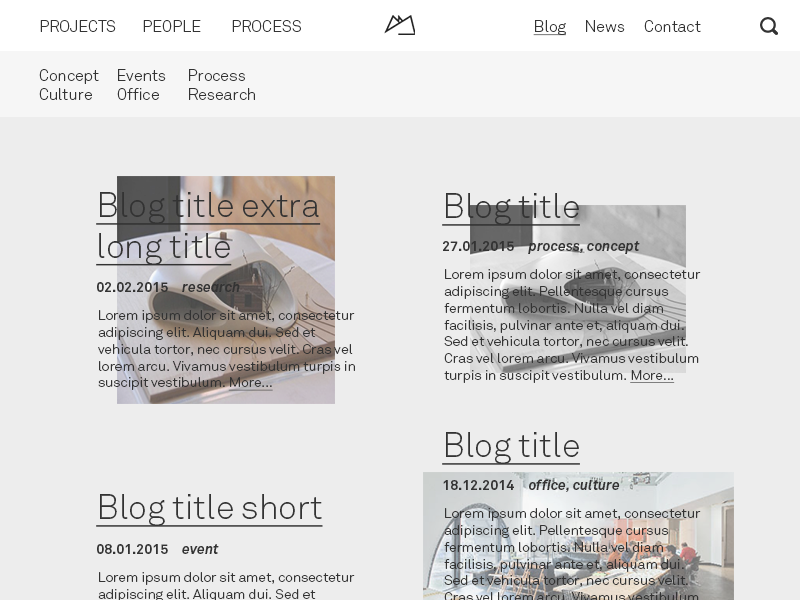
<style>
.page{position:relative;width:800px;height:600px;background:#ededed}
.page>*{position:absolute;margin:0}
.t1{font:16px "Akkurat-Light";color:#333333}
.t2{font:16px "Akkurat-Light";color:#333333;text-decoration:underline}
.t3{font:34px "Akkurat-Light";color:#333333;text-decoration:underline}
.t4{font:14px "Akkurat-BoldItalic";color:#333333}
.t5{font:14px "Akkurat-Bold";color:#333333}
.t6{font:14px "Akkurat-Light";color:#333333}
.t7{font:14px "Akkurat-Light";color:#333333;text-decoration:underline}
</style>
<div class="page">
<p class="t1" style="left:40px;top:20px;width:76px;height:12px">PROJECTS</p>
<p class="t1" style="left:143px;top:20px;width:58px;height:12px">PEOPLE</p>
<p class="t1" style="left:232px;top:20px;width:69px;height:12px">PROCESS</p>
<p class="t2" style="left:533px;top:20px;width:33px;height:16px">Blog</p>
<p class="t1" style="left:586px;top:20px;width:39px;height:12px">News</p>
<p class="t1" style="left:644px;top:20px;width:57px;height:12px">Contact</p>
<p class="t1" style="left:39px;top:69px;width:60px;height:31px">Concept<br>Culture</p>
<p class="t1" style="left:117px;top:69px;width:49px;height:31px">Events<br>Office</p>
<p class="t1" style="left:189px;top:69px;width:66px;height:31px">Process<br>Research</p>
<p class="t3" style="left:96px;top:192px;width:225px;height:74px">Blog title extra long title</p>
<p class="t3" style="left:442px;top:193px;width:138px;height:33px">Blog title</p>
<p class="t4" style="left:443px;top:241px;width:197px;height:13px"><span class="t5">27.01.2015     </span>process, concept</p>
<p class="t6" style="left:444px;top:269px;width:257px;height:114px">Lorem ipsum dolor sit amet, consectetur adipiscing elit. Pellentesque cursus fermentum lobortis. Nulla vel diam facilisis, pulvinar ante et, aliquam dui. Sed et vehicula tortor, nec cursus velit. Cras vel lorem arcu. Vivamus vestibulum turpis in suscipit vestibulum. <span class="t7">More...</span></p>
<p class="t5" style="left:97px;top:282px;width:143px;height:10px">02.02.2015     <span class="t4">research</span></p>
<p class="t6" style="left:98px;top:310px;width:257px;height:81px">Lorem ipsum dolor sit amet, consectetur adipiscing elit. Aliquam dui. Sed et vehicula tortor, nec cursus velit. Cras vel lorem arcu. Vivamus vestibulum turpis in suscipit vestibulum. <span class="t7">More...</span></p>
<p class="t3" style="left:442px;top:432px;width:138px;height:33px">Blog title</p>
<p class="t4" style="left:443px;top:479px;width:177px;height:13px"><span class="t5">18.12.2014     </span>office, culture</p>
<p class="t3" style="left:96px;top:494px;width:227px;height:33px">Blog title short</p>
<p class="t5" style="left:97px;top:544px;width:122px;height:10px">08.01.2015     <span class="t4">event</span></p>
</div>
